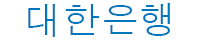
<style>
.page{position:relative;width:200px;height:40px;background:#ffffff}
.page>*{position:absolute;margin:0}
.t1{font:38px "Dotum";letter-spacing:0.01em;color:#0076be}
</style>
<div class="page">
<p class="t1" style="left:28px;top:3px;width:143px;height:34px">대한은행</p>
</div>
